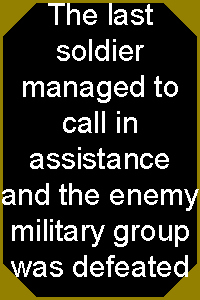
<style>
.page{position:relative;width:200px;height:300px;background:#000000}
.page>*{position:absolute;margin:0}
.t1{font:30px "ArialMT";color:#ffffff}
</style>
<div class="page">
<p class="t1" style="left:2px;top:3px;width:197px;height:274px;text-align:center">The last soldier managed to call in assistance and the enemy military group was defeated</p>
</div>
